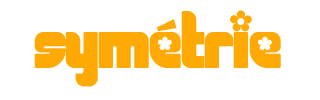
<style>
.page{position:relative;width:320px;height:100px;background:#ffffff}
.page>*{position:absolute;margin:0}
.t1{font:72px "Chick";color:#ffa904}
</style>
<div class="page">
<p class="t1" style="left:34px;top:10px;width:247px;height:77px">symétrie</p>
</div>
